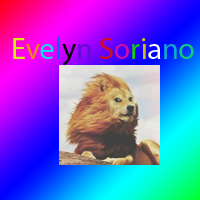
<style>
.page{position:relative;width:200px;height:200px}
.page>*{position:absolute;margin:0}
.t1{font:30px "MyriadPro-Regular";color:#d1ed13}
.t2{font:30px "MyriadPro-Regular";color:#f08512}
.t3{font:30px "MyriadPro-Regular";color:#13dcee}
.t4{font:30px "MyriadPro-Regular";color:#1360ee}
.t5{font:30px "MyriadPro-Regular";color:#020408}
.t6{font:30px "MyriadPro-Regular";color:#600dd0}
.t7{font:30px "MyriadPro-Regular";color:#d00d1f}
.t8{font:30px "MyriadPro-Regular";color:#d00da4}
.t9{font:30px "MyriadPro-Regular";color:#12d00d}
.t10{font:30px "MyriadPro-Regular";color:#d0c00d}
.t11{font:30px "MyriadPro-Regular";color:#fdfdfd}
.t12{font:30px "MyriadPro-Regular";color:#10a6cc}
.t13{font:30px "MyriadPro-Regular";color:#10cc71}
</style>
<div class="page">
<p class="t1" style="left:13px;top:37px;width:181px;height:29px">E<span class="t2">v</span><span class="t3">e</span><span class="t4">l</span><span class="t5">y</span><span class="t6">n </span><span class="t7">S</span><span class="t8">o</span><span class="t9">r</span><span class="t10">i</span><span class="t11">a</span><span class="t12">n</span><span class="t13">o</span></p>
</div>
